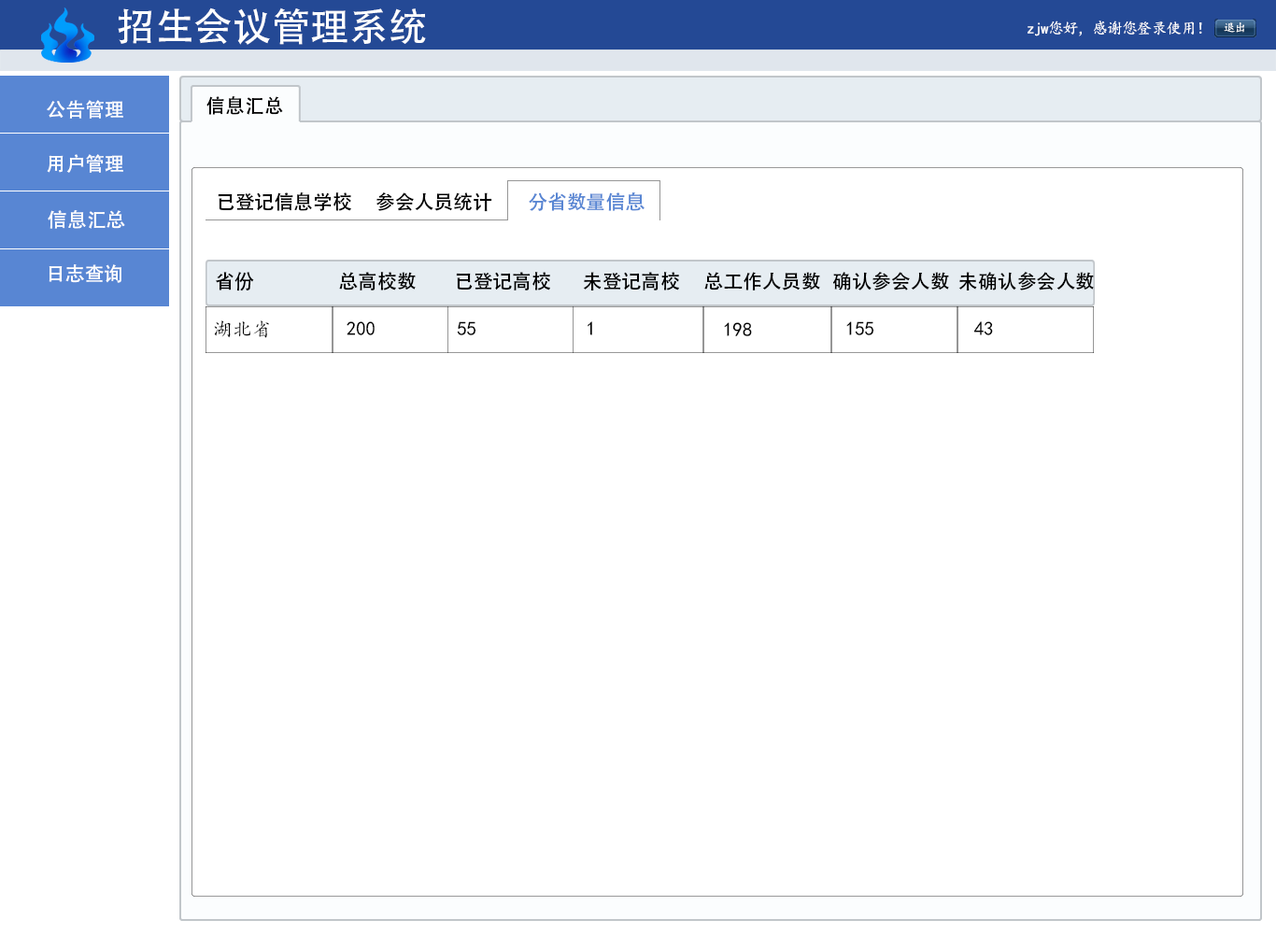
<style>
.page{position:relative;width:1276px;height:934px;background:#ffffff}
.page>*{position:absolute;margin:0}
.t1{font:38.9px "AdobeHeitiStd-Regular";color:#ffffff}
.t2{font:15.6px "KaiTi";letter-spacing:-0.05em;color:#ffffff}
.t3{font:11.7px "KaiTi";letter-spacing:-0.05em;color:#ffffff}
.t4{font:19.5px "AdobeHeitiStd-Regular";color:#fefefe}
.t5{font:19.5px "AdobeHeitiStd-Regular";color:#000000}
.t6{font:19.5px "AdobeHeitiStd-Regular";color:#010101}
.t7{font:19.5px "AdobeHeitiStd-Regular";color:#5886d3}
.t8{font:19.5px "KaiTi";color:#000000}
</style>
<div class="page">
<p class="t1" style="left:118px;top:7px;width:308px;height:38px">招生会议管理系统</p>
<p class="t2" style="left:1028px;top:21px;width:174px;height:15px">zjw您好，感谢您登录使用！</p>
<p class="t3" style="left:1224px;top:22px;width:21px;height:11px">退出</p>
<p class="t4" style="left:47px;top:100px;width:76px;height:19px">公告管理</p>
<p class="t5" style="left:206px;top:96px;width:77px;height:19px">信息汇总</p>
<p class="t4" style="left:47px;top:154px;width:76px;height:19px">用户管理</p>
<p class="t5" style="left:218px;top:192px;width:133px;height:19px">已登记信息学校</p>
<p class="t6" style="left:377px;top:192px;width:115px;height:20px">参会人员统计</p>
<p class="t7" style="left:529px;top:192px;width:116px;height:19px">分省数量信息</p>
<p class="t4" style="left:48px;top:210px;width:77px;height:19px">信息汇总</p>
<p class="t4" style="left:49px;top:264px;width:72px;height:19px">日志查询</p>
<p class="t5" style="left:216px;top:272px;width:38px;height:20px">省份</p>
<p class="t5" style="left:339px;top:272px;width:77px;height:19px">总高校数</p>
<p class="t5" style="left:456px;top:272px;width:94px;height:19px">已登记高校</p>
<p class="t5" style="left:583px;top:272px;width:96px;height:19px">未登记高校</p>
<p class="t5" style="left:704px;top:272px;width:116px;height:19px">总工作人员数</p>
<p class="t5" style="left:832px;top:272px;width:117px;height:19px">确认参会人数</p>
<p class="t5" style="left:959px;top:272px;width:135px;height:19px">未确认参会人数</p>
<p class="t8" style="left:214px;top:320px;width:55px;height:18px">湖北省</p>
<p class="t8" style="left:347px;top:321px;width:28px;height:14px">200</p>
<p class="t8" style="left:457px;top:321px;width:19px;height:14px">55</p>
<p class="t8" style="left:588px;top:321px;width:4px;height:14px">1</p>
<p class="t8" style="left:724px;top:322px;width:28px;height:14px">198</p>
<p class="t8" style="left:846px;top:321px;width:29px;height:14px">155</p>
<p class="t8" style="left:974px;top:321px;width:19px;height:14px">43</p>
</div>
